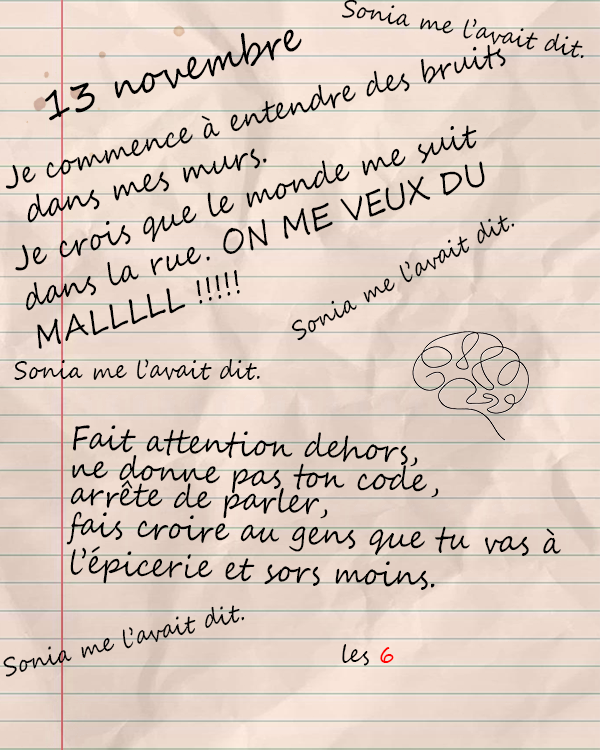
<style>
.page{position:relative;width:600px;height:750px}
.page>*{position:absolute;margin:0}
.t1{font:25px "SegoeScript";color:#000000;scale:0.9 1}
.t2{font:42px "SegoeScript";color:#000000;scale:0.9 1}
.t3{font:30.9px "SegoeScript";color:#000000;scale:0.9 1}
.t4{font:33.3px "SegoeScript";color:#000000;scale:0.9 1}
.t5{font:34.2px "SegoeScript";color:#000000;scale:0.9 1}
.t6{font:25px "SegoeScript";color:#ff0000;scale:0.9 1}
</style>
<div class="page">
<p class="t1" style="left:342px;top:0px;width:242px;height:59px;rotate:10deg">Sonia me l’avait dit.</p>
<p class="t2" style="left:45px;top:29px;width:257px;height:92px;rotate:-16deg">13 novembre</p>
<p class="t3" style="left:5px;top:44px;width:501px;height:145px;rotate:-14deg">Je commence à entendre des bruits</p>
<p class="t4" style="left:15px;top:125px;width:470px;height:224px;rotate:-15deg">Je crois que le monde me suit dans la rue. ON ME VEUX DU MALLLLL !!!!!</p>
<p class="t5" style="left:27px;top:148px;width:240px;height:75px;rotate:-14deg">dans mes murs.</p>
<p class="t1" style="left:291px;top:215px;width:224px;height:126px;rotate:-28deg">Sonia me l’avait dit.</p>
<p class="t1" style="left:14px;top:359px;width:246px;height:21px">Sonia me l’avait dit.</p>
<p class="t4" style="left:73px;top:425px;width:345px;height:42px;rotate:2deg">Fait attention dehors,</p>
<p class="t4" style="left:72px;top:455px;width:367px;height:43px;rotate:2deg">ne donne pas ton code,</p>
<p class="t4" style="left:70px;top:480px;width:258px;height:39px;rotate:2deg">arrête de parler,</p>
<p class="t4" style="left:66px;top:511px;width:495px;height:45px;rotate:2deg">fais croire au gens que tu vas à</p>
<p class="t4" style="left:70px;top:546px;width:365px;height:44px;rotate:2deg">l’épicerie et sors moins.</p>
<p class="t1" style="left:3px;top:605px;width:242px;height:72px;rotate:-13deg">Sonia me l’avait dit.</p>
<p class="t1" style="left:342px;top:644px;width:52px;height:22px">les <span class="t6">6</span></p>
</div>
